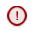
<style>
.page{position:relative;width:34px;height:34px;background:#ffffff}
.page>*{position:absolute;margin:0}
.t1{font:12px "ArialMT";letter-spacing:0.1em;color:#990000}
</style>
<div class="page">
<p class="t1" style="left:16px;top:11px;width:2px;height:9px">!</p>
</div>
